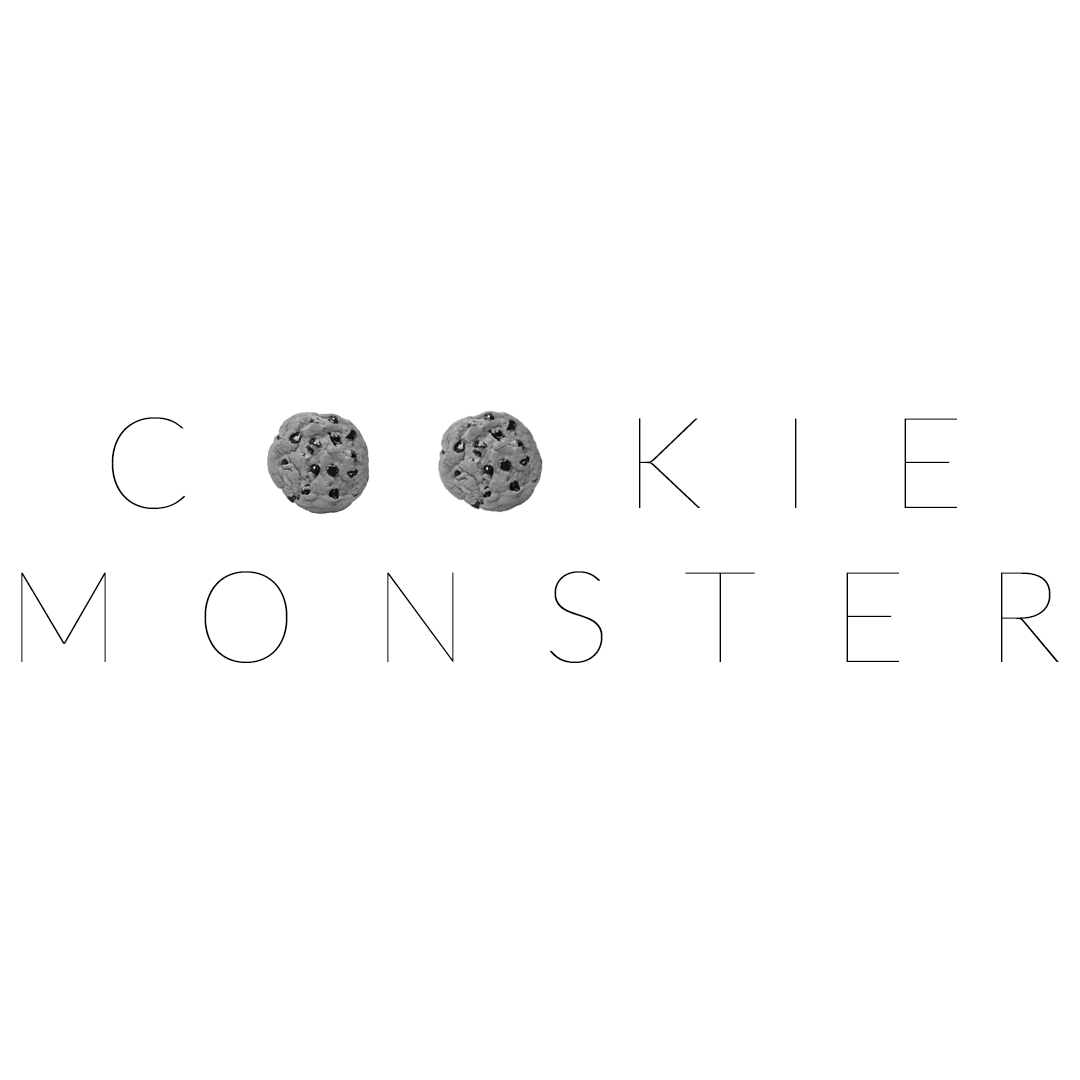
<style>
.page{position:relative;width:1080px;height:1080px;background:#ffffff}
.page>*{position:absolute;margin:0}
.t1{font:128px "Lato-Hairline";letter-spacing:0.58em;color:#000000}
</style>
<div class="page">
<p class="t1" style="left:21px;top:417px;width:1038px;height:246px;text-align:center">COOKIE<br>MONSTER</p>
</div>
